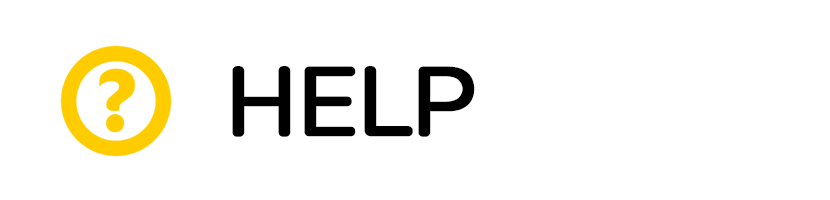
<style>
.page{position:relative;width:830px;height:200px;background:#ffffff}
.page>*{position:absolute;margin:0}
.t1{font:98px "VarelaRound-Regular";letter-spacing:-0.05em;color:#000000;font-weight:bold}
</style>
<div class="page">
<p class="t1" style="left:232px;top:66px;width:243px;height:71px">HELP</p>
</div>
